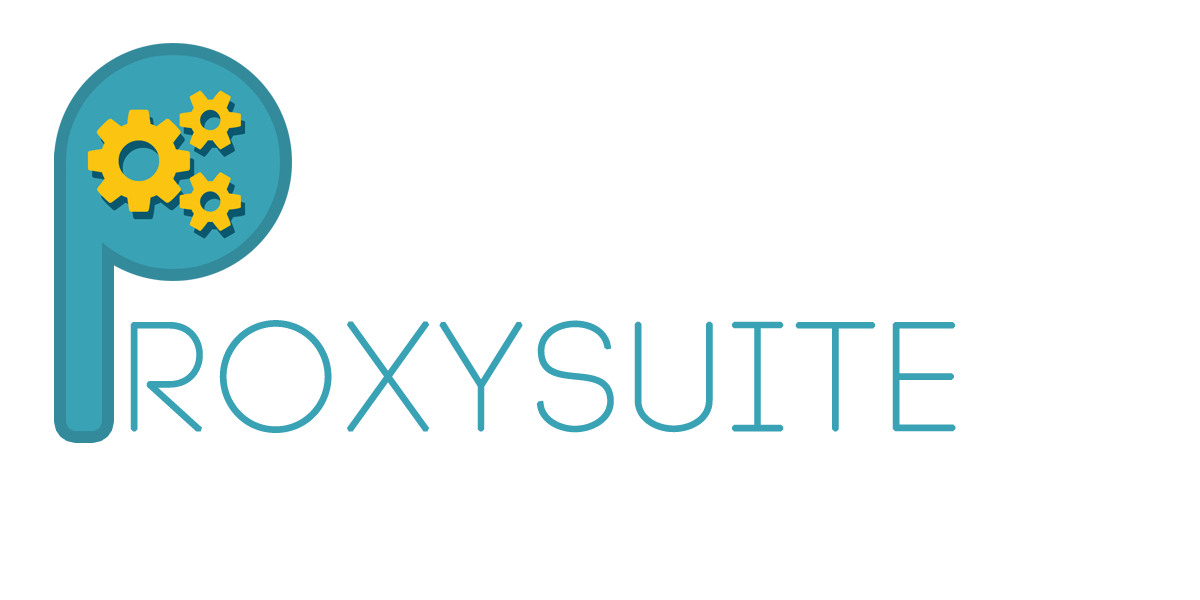
<style>
.page{position:relative;width:1200px;height:600px;background:#ffffff}
.page>*{position:absolute;margin:0}
.t1{font:150px "Code-Light";letter-spacing:0.06em;color:#3aa2b5;font-weight:bold}
</style>
<div class="page">
<p class="t1" style="left:130px;top:320px;width:826px;height:113px">roxysuite</p>
</div>
